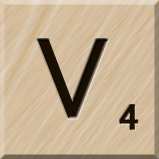
<style>
.page{position:relative;width:159px;height:159px}
.page>*{position:absolute;margin:0}
.t1{font:116px "MS-UIGothic";color:#180e01}
.t2{font:36px "MS-UIGothic";color:#1c1101;font-weight:bold;scale:1.1 1}
</style>
<div class="page">
<p class="t1" style="left:37px;top:39px;width:71px;height:80px">V</p>
<p class="t2" style="left:119px;top:104px;width:20px;height:27px">4</p>
</div>
